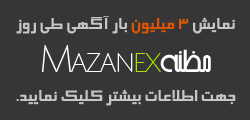
<style>
.page{position:relative;width:250px;height:120px;background:#363636}
.page>*{position:absolute;margin:0}
.t1{font:20px/24px "BElham";color:#c6c6c6}
.t2{font:20px/24px "BElham";color:#da5505}
</style>
<div class="page">
<p class="t1" style="left:16px;top:16px;width:220px;height:90px;text-align:center">نمایش <span class="t2">3 میلیون</span> بار آگهی طی روز<br><br><br>جهت اطلاعات بیشتر کلیک نمایید.</p>
</div>
